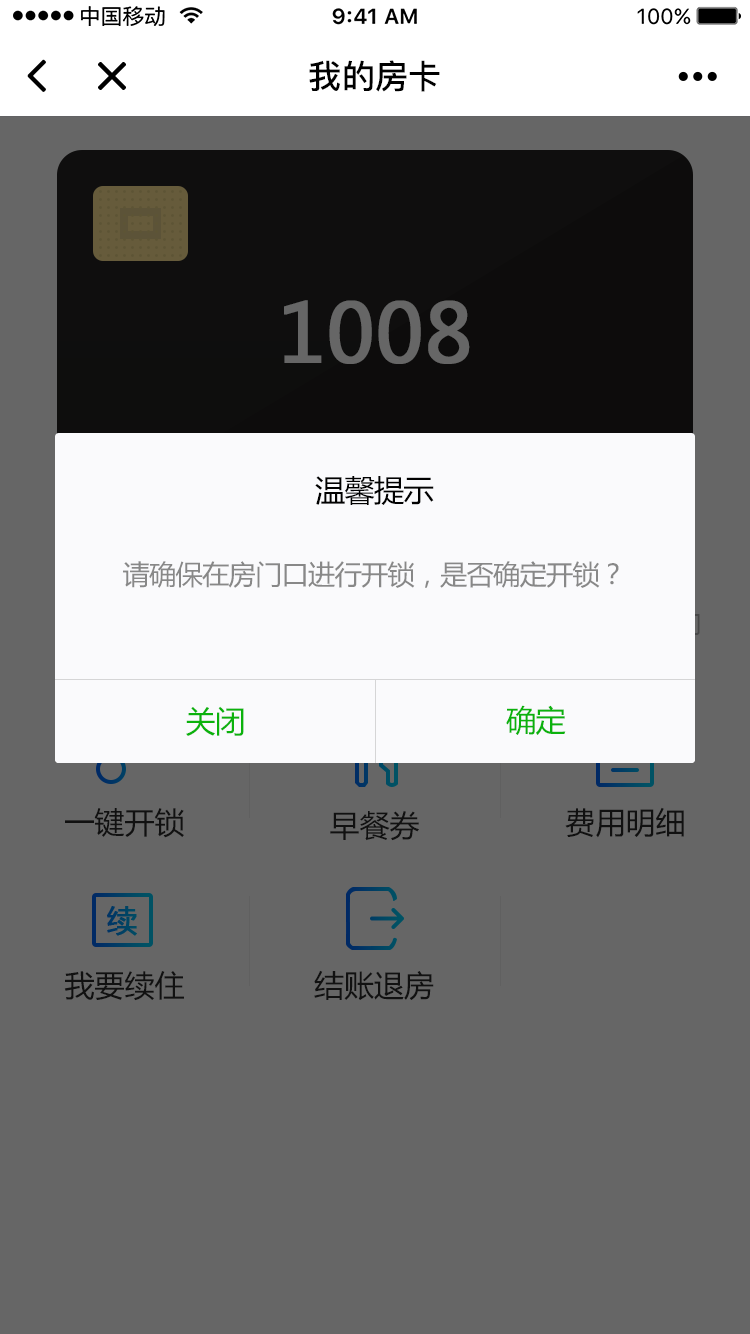
<style>
.page{position:relative;width:750px;height:1334px;background:#666666}
.page>*{position:absolute;margin:0}
.t1{font:33.2px "PingFang-SC-Bold";color:#000000}
.t2{font:80px "MicrosoftYaHei";color:#666666;font-weight:bold}
.t3{font:30.2px "MicrosoftYaHei";letter-spacing:-0.026em;color:#010101}
.t4{font:27.2px "MicrosoftYaHei";letter-spacing:-0.026em;color:#888888}
.t5{font:30.2px "MicrosoftYaHei";letter-spacing:-0.026em;color:#0bb20c}
.t6{font:30px "MicrosoftYaHei";color:#111111}
</style>
<div class="page">
<p class="t1" style="left:309px;top:60px;width:131px;height:32px">我的房卡</p>
<p class="t2" style="left:284px;top:300px;width:186px;height:64px">1008</p>
<p class="t3" style="left:315px;top:476px;width:119px;height:29px">温馨提示</p>
<p class="t4" style="left:123px;top:561px;width:496px;height:27px">请确保在房门口进行开锁，是否确定开锁？</p>
<p class="t5" style="left:186px;top:706px;width:58px;height:30px">关闭</p>
<p class="t5" style="left:506px;top:705px;width:60px;height:30px">确定</p>
<p class="t6" style="left:65px;top:808px;width:119px;height:30px">一键开锁</p>
<p class="t6" style="left:565px;top:807px;width:119px;height:31px">费用明细</p>
<p class="t6" style="left:330px;top:811px;width:89px;height:30px">早餐券</p>
<p class="t6" style="left:64px;top:971px;width:120px;height:30px">我要续住</p>
<p class="t6" style="left:314px;top:970px;width:120px;height:30px">结账退房</p>
</div>
